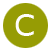
<style>
.page{position:relative;width:50px;height:50px;background:#969c04}
.page>*{position:absolute;margin:0}
.t1{font:30px "Verdana";color:#fefdfd}
</style>
<div class="page">
<p class="t1" style="left:15px;top:14px;width:19px;height:22px">C</p>
</div>
